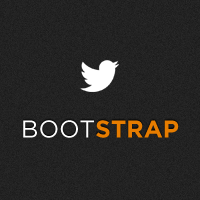
<style>
.page{position:relative;width:200px;height:200px}
.page>*{position:absolute;margin:0}
.t1{font:24.1px "Gotham-Bold";color:#e77d00}
.t2{font:24.1px "Gotham-Book";color:#ffffff}
</style>
<div class="page">
<p class="t1" style="left:23px;top:120px;width:156px;height:18px"><span class="t2">BOOT</span>STRAP</p>
</div>
